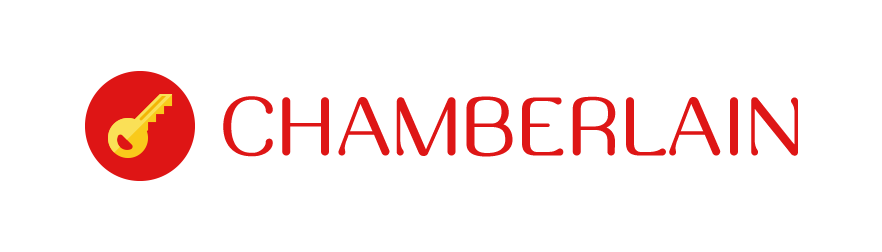
<style>
.page{position:relative;width:882px;height:252px;background:#ffffff}
.page>*{position:absolute;margin:0}
.t1{font:80px "Massa";color:#de1616}
</style>
<div class="page">
<p class="t1" style="left:223px;top:96px;width:575px;height:61px">CHAMBERLAIN</p>
</div>
